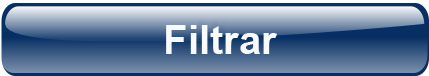
<style>
.page{position:relative;width:429px;height:76px}
.page>*{position:absolute;margin:0}
.t1{font:40px "Arial-BoldMT";color:#f8fafc}
</style>
<div class="page">
<p class="t1" style="left:166px;top:25px;width:111px;height:29px">Filtrar</p>
</div>
